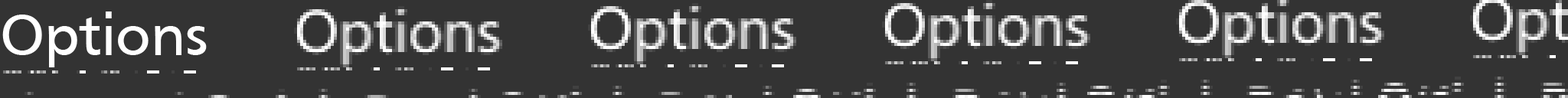
<style>
.page{position:relative;width:1568px;height:98px;background:#333333}
.page>*{position:absolute;margin:0}
.t1{font:60.4px "Frutiger";color:#ffffff}
</style>
<div class="page">
<p class="t1" style="left:2px;top:11px;width:205px;height:56px">Options</p>
</div>
